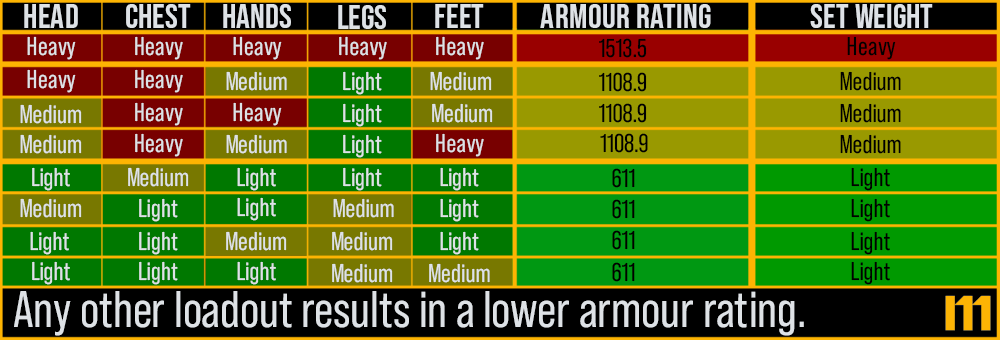
<style>
.page{position:relative;width:1000px;height:340px}
.page>*{position:absolute;margin:0}
.t1{font:34.3px "BebasNeue-Regular";color:#dee2e6}
.t2{font:25.7px "BebasNeuePro-Regular";color:#dee2e6}
.t3{font:25.7px "BebasNeuePro-Regular";color:#000000}
.t4{font:51.4px "BebasNeuePro-Regular";color:#dee2e6}
</style>
<div class="page">
<p class="t1" style="left:24px;top:4px;width:54px;height:24px">Head</p>
<p class="t1" style="left:126px;top:4px;width:65px;height:24px">Chest</p>
<p class="t1" style="left:223px;top:4px;width:68px;height:24px">Hands</p>
<p class="t1" style="left:338px;top:5px;width:48px;height:24px">Legs</p>
<p class="t1" style="left:435px;top:4px;width:49px;height:24px">Feet</p>
<p class="t1" style="left:540px;top:4px;width:171px;height:24px">Armour rating</p>
<p class="t1" style="left:810px;top:4px;width:123px;height:24px">set weight</p>
<p class="t2" style="left:27px;top:36px;width:49px;height:24px">Heavy</p>
<p class="t2" style="left:135px;top:36px;width:48px;height:24px">Heavy</p>
<p class="t2" style="left:233px;top:36px;width:49px;height:24px">Heavy</p>
<p class="t2" style="left:339px;top:36px;width:48px;height:24px">Heavy</p>
<p class="t2" style="left:436px;top:36px;width:48px;height:24px">Heavy</p>
<p class="t3" style="left:599px;top:38px;width:48px;height:20px">1513.5</p>
<p class="t3" style="left:847px;top:36px;width:49px;height:24px">Heavy</p>
<p class="t2" style="left:27px;top:69px;width:49px;height:24px">Heavy</p>
<p class="t2" style="left:135px;top:69px;width:48px;height:24px">Heavy</p>
<p class="t2" style="left:226px;top:71px;width:61px;height:20px">Medium</p>
<p class="t2" style="left:343px;top:71px;width:39px;height:24px">Light</p>
<p class="t2" style="left:430px;top:71px;width:62px;height:20px">Medium</p>
<p class="t3" style="left:599px;top:72px;width:48px;height:20px">1108.9</p>
<p class="t3" style="left:840px;top:71px;width:61px;height:20px">Medium</p>
<p class="t2" style="left:135px;top:102px;width:48px;height:24px">Heavy</p>
<p class="t2" style="left:233px;top:102px;width:49px;height:24px">Heavy</p>
<p class="t2" style="left:20px;top:104px;width:62px;height:20px">Medium</p>
<p class="t2" style="left:343px;top:103px;width:39px;height:24px">Light</p>
<p class="t2" style="left:432px;top:103px;width:61px;height:20px">Medium</p>
<p class="t3" style="left:599px;top:103px;width:48px;height:20px">1108.9</p>
<p class="t3" style="left:840px;top:103px;width:61px;height:20px">Medium</p>
<p class="t2" style="left:20px;top:134px;width:62px;height:20px">Medium</p>
<p class="t2" style="left:135px;top:133px;width:48px;height:24px">Heavy</p>
<p class="t2" style="left:226px;top:134px;width:61px;height:20px">Medium</p>
<p class="t2" style="left:343px;top:134px;width:39px;height:24px">Light</p>
<p class="t2" style="left:436px;top:133px;width:48px;height:24px">Heavy</p>
<p class="t3" style="left:600px;top:133px;width:48px;height:20px">1108.9</p>
<p class="t3" style="left:840px;top:134px;width:61px;height:20px">Medium</p>
<p class="t2" style="left:32px;top:167px;width:38px;height:24px">Light</p>
<p class="t2" style="left:128px;top:167px;width:61px;height:20px">Medium</p>
<p class="t2" style="left:237px;top:167px;width:39px;height:24px">Light</p>
<p class="t2" style="left:343px;top:167px;width:39px;height:24px">Light</p>
<p class="t2" style="left:440px;top:167px;width:39px;height:24px">Light</p>
<p class="t3" style="left:612px;top:168px;width:23px;height:20px">611</p>
<p class="t3" style="left:851px;top:167px;width:39px;height:24px">Light</p>
<p class="t2" style="left:20px;top:198px;width:62px;height:20px">Medium</p>
<p class="t2" style="left:139px;top:198px;width:39px;height:24px">Light</p>
<p class="t2" style="left:237px;top:197px;width:39px;height:24px">Light</p>
<p class="t2" style="left:333px;top:198px;width:61px;height:20px">Medium</p>
<p class="t2" style="left:440px;top:198px;width:39px;height:24px">Light</p>
<p class="t3" style="left:851px;top:198px;width:39px;height:24px">Light</p>
<p class="t3" style="left:612px;top:199px;width:23px;height:20px">611</p>
<p class="t2" style="left:30px;top:231px;width:39px;height:24px">Light</p>
<p class="t2" style="left:139px;top:231px;width:39px;height:24px">Light</p>
<p class="t2" style="left:226px;top:231px;width:61px;height:20px">Medium</p>
<p class="t2" style="left:332px;top:231px;width:61px;height:20px">Medium</p>
<p class="t2" style="left:440px;top:231px;width:39px;height:24px">Light</p>
<p class="t3" style="left:612px;top:230px;width:23px;height:20px">611</p>
<p class="t3" style="left:851px;top:231px;width:39px;height:24px">Light</p>
<p class="t2" style="left:32px;top:261px;width:38px;height:24px">Light</p>
<p class="t2" style="left:139px;top:261px;width:39px;height:24px">Light</p>
<p class="t2" style="left:237px;top:261px;width:39px;height:24px">Light</p>
<p class="t2" style="left:332px;top:263px;width:61px;height:20px">Medium</p>
<p class="t2" style="left:429px;top:263px;width:61px;height:20px">Medium</p>
<p class="t3" style="left:612px;top:262px;width:23px;height:20px">611</p>
<p class="t3" style="left:851px;top:261px;width:39px;height:24px">Light</p>
<p class="t4" style="left:14px;top:291px;width:790px;height:45px">Any other loadout results in a lower armour rating.</p>
</div>
